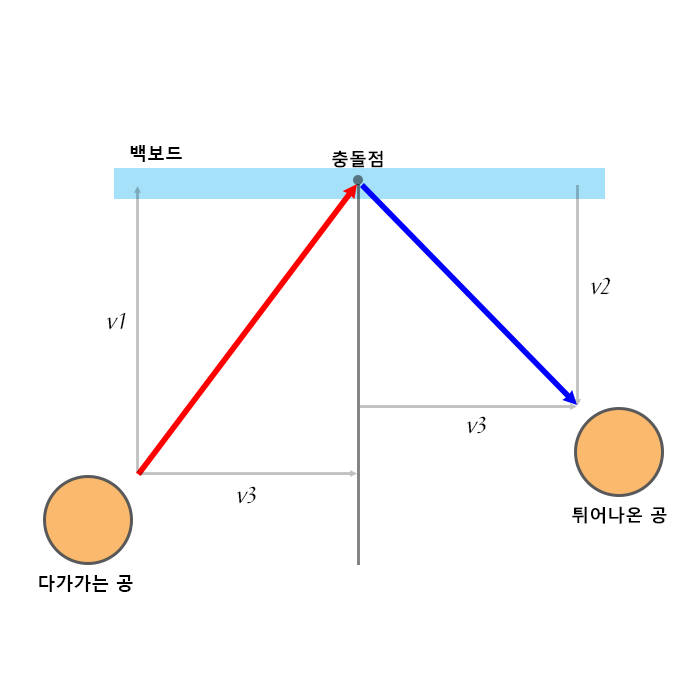
<style>
.page{position:relative;width:700px;height:700px;background:#ffffff}
.page>*{position:absolute;margin:0}
.t1{font:18px "MalgunGothicBold";color:#000000}
.t2{font:17.8px "MalgunGothicBold";color:#000000}
.t3{font:24px "YJ-BELLA-Medium";color:#000000}
</style>
<div class="page">
<p class="t1" style="left:130px;top:145px;width:52px;height:17px">백보드</p>
<p class="t2" style="left:332px;top:150px;width:51px;height:18px">충돌점</p>
<p class="t3" style="left:590px;top:277px;width:21px;height:18px">v2</p>
<p class="t3" style="left:106px;top:312px;width:20px;height:18px">v1</p>
<p class="t3" style="left:466px;top:416px;width:20px;height:18px">v3</p>
<p class="t3" style="left:236px;top:486px;width:20px;height:18px">v3</p>
<p class="t2" style="left:572px;top:506px;width:95px;height:18px">튀어나온 공</p>
<p class="t1" style="left:39px;top:575px;width:94px;height:17px">다가가는 공</p>
</div>
